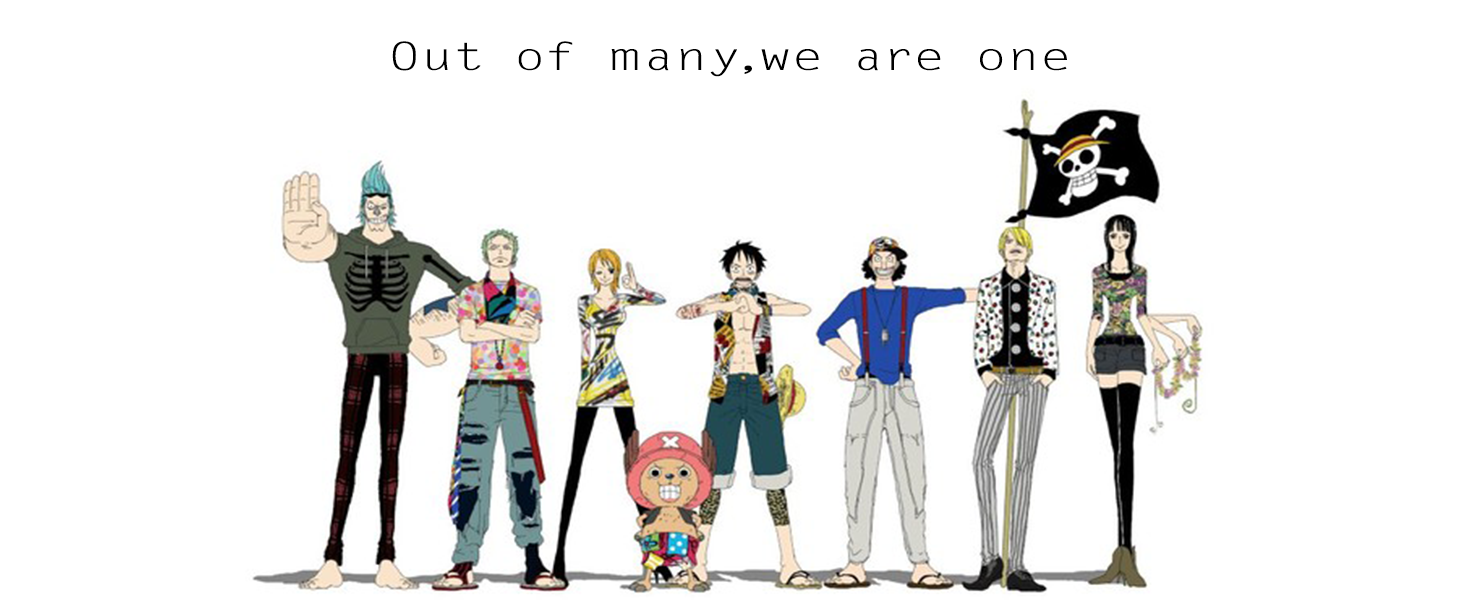
<style>
.page{position:relative;width:1460px;height:600px;background:#ffffff}
.page>*{position:absolute;margin:0}
.t1{font:38.9px "FZYXJW--GB1-0";letter-spacing:0.1em;color:#000000;scale:1.39 1}
</style>
<div class="page">
<p class="t1" style="left:392px;top:41px;width:675px;height:36px">Out of many,we are one</p>
</div>
